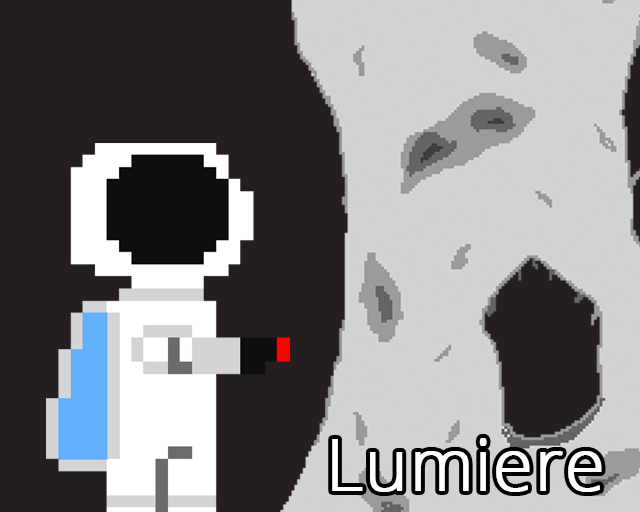
<style>
.page{position:relative;width:640px;height:512px;background:#241e20}
.page>*{position:absolute;margin:0}
.t1{font:72px "OpenSans-Light";color:#ffffff;font-weight:bold}
</style>
<div class="page">
<p class="t1" style="left:332px;top:438px;width:270px;height:54px">Lumiere</p>
</div>
